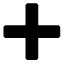
<style>
.page{position:relative;width:64px;height:64px;background:#ffffff}
.page>*{position:absolute;margin:0}
.t1{font:112px "ArialMT";letter-spacing:-0.005em;color:#000000;font-weight:bold}
</style>
<div class="page">
<p class="t1" style="left:3px;top:3px;width:58px;height:57px">+</p>
</div>
